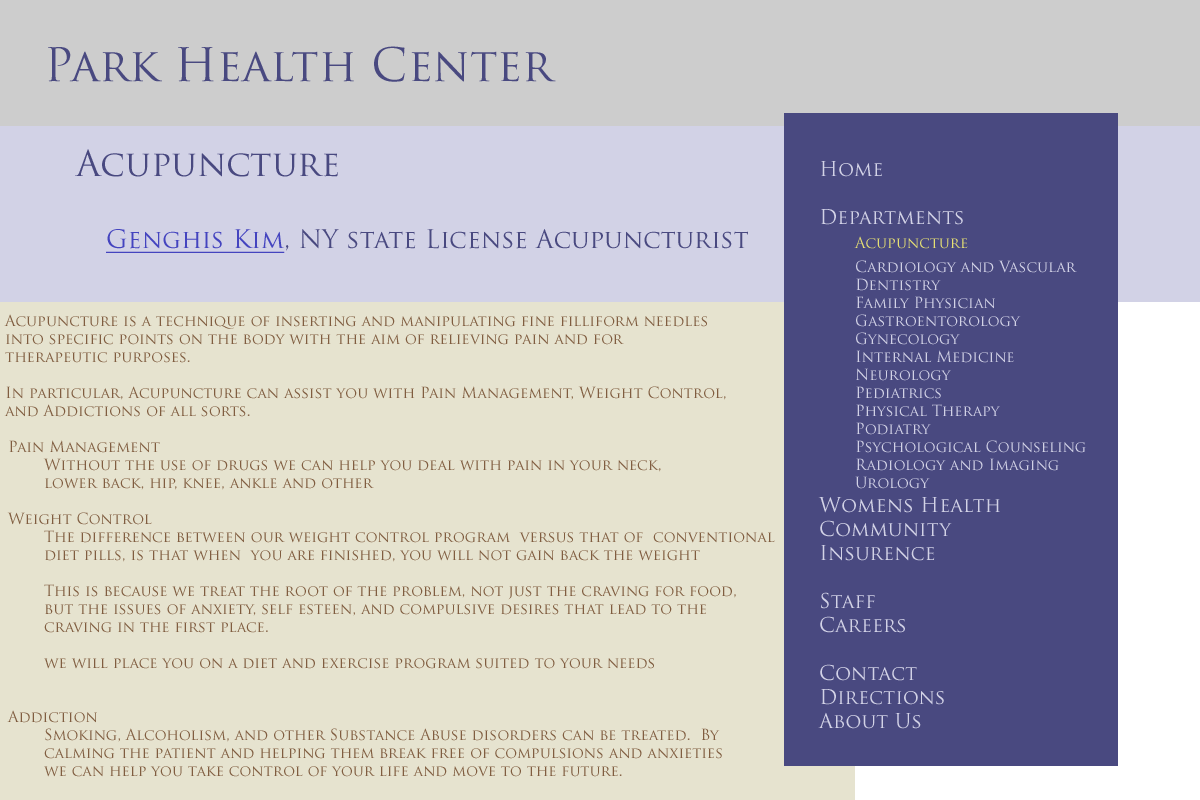
<style>
.page{position:relative;width:1200px;height:800px;background:#e6e3cf}
.page>*{position:absolute;margin:0}
.t1{font:45px "TrajanPro-Regular";color:#494980}
.t2{font:35px "TrajanPro-Regular";color:#494980}
.t3{font:15px "TrajanPro-Regular";color:#d2d2e6}
.t4{font:20px "TrajanPro-Regular";color:#d2d2e6}
.t5{font:15px "TrajanPro-Regular";color:#e6e073}
.t6{font:25px "TrajanPro-Regular";color:#494980}
.t7{font:25px "TrajanPro-Regular";color:#4444bf;text-decoration:underline}
.t8{font:15px "TrajanPro-Regular";color:#805d40}
</style>
<div class="page">
<p class="t1" style="left:48px;top:46px;width:508px;height:36px">Park Health Center</p>
<p class="t2" style="left:75px;top:149px;width:263px;height:28px">Acupuncture</p>
<p class="t3" style="left:818px;top:161px;width:268px;height:568px"><span class="t4">Home<br><br>Departments<br> </span><span class="t5">Acupuncture<br> </span>Cardiology and Vascular<br> Dentistry<br> Family Physician<br> Gastroentorology<br> Gynecology<br> Internal Medicine<br> Neurology<br> Pediatrics<br> Physical Therapy<br> Podiatry<br> Psychological Counseling<br> Radiology and Imaging<br> Urology<br><span class="t4">Womens Health<br>Community<br>Insurence<br><br>Staff<br>Careers<br><br>Contact<br>Directions<br>About Us</span></p>
<p class="t6" style="left:106px;top:229px;width:642px;height:24px"><span class="t7">Genghis Kim</span>, NY state License Acupuncturist</p>
<p class="t8" style="left:4px;top:314px;width:722px;height:103px">Acupuncture is a technique of inserting and manipulating fine filliform needles <br>into specific points on the body with the aim of relieving pain and for <br>therapeutic purposes.<br><br>In particular, Acupuncture can assist you with Pain Management, Weight Control,<br>and Addictions of all sorts.</p>
<p class="t8" style="left:7px;top:440px;width:768px;height:337px">Pain Management<br> Without the use of drugs we can help you deal with pain in your neck, <br> lower back, hip, knee, ankle and other<br><br>Weight Control<br> The difference between our weight control program  versus that of  conventional <br> diet pills, is that when  you are finished, you will not gain back the weight<br><br> This is because we treat the root of the problem, not just the craving for food, <br> but the issues of anxiety, self esteen, and compulsive desires that lead to the <br> craving in the first place.<br><br> we will place you on a diet and exercise program suited to your needs<br><br><br>Addiction<br> Smoking, Alcoholism, and other Substance Abuse disorders can be treated.  By<br> calming the patient and helping them break free of compulsions and anxieties<br> we can help you take control of your life and move to the future.</p>
</div>
